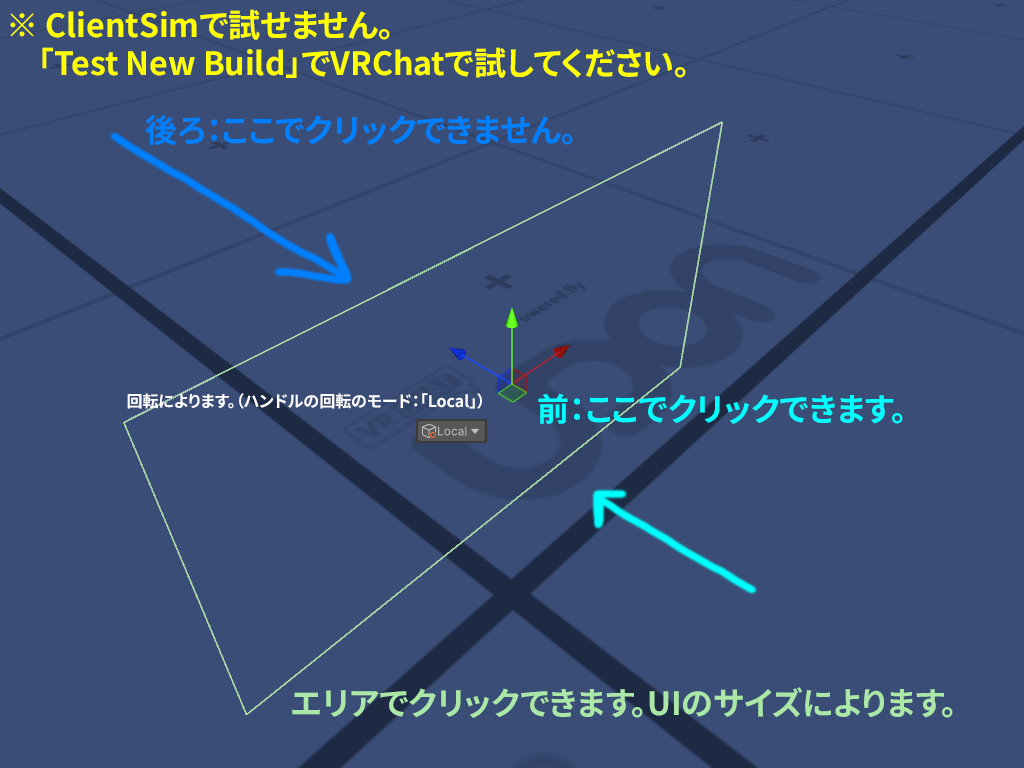
<style>
.page{position:relative;width:1024px;height:768px;background:#3a4d76}
.page>*{position:absolute;margin:0}
.t1{font:32px "NotoSansJP-Bold";color:#ffff00}
.t2{font:32px "NotoSansJP-Bold";color:#0080ff}
.t3{font:16px "NotoSansJP-Bold";color:#ffffff}
.t4{font:32px "NotoSansJP-Bold";color:#00ffff}
.t5{font:32px "NotoSansJP-Bold";color:#abe8a8}
</style>
<div class="page">
<p class="t1" style="left:10px;top:9px;width:676px;height:69px">※ ClientSimで試せません。<br>　「Test New Build」でVRChatで試してください。</p>
<p class="t2" style="left:145px;top:114px;width:428px;height:31px">後ろ：ここでクリックできません。</p>
<p class="t3" style="left:127px;top:393px;width:355px;height:16px">回転によります。（ハンドルの回転のモード：「Local」）</p>
<p class="t4" style="left:538px;top:393px;width:365px;height:31px">前：ここでクリックできます。</p>
<p class="t5" style="left:292px;top:687px;width:661px;height:31px">エリアでクリックできます。UIのサイズによります。</p>
</div>
